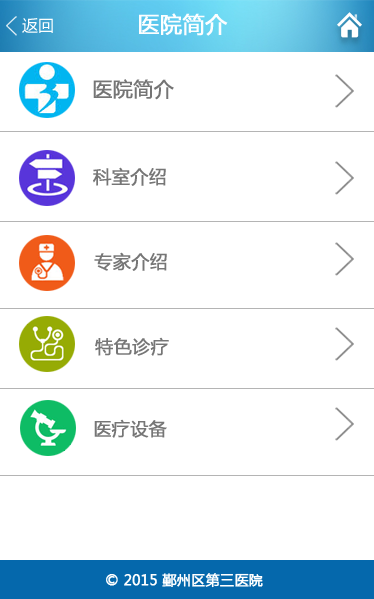
<style>
.page{position:relative;width:374px;height:599px;background:#ffffff}
.page>*{position:absolute;margin:0}
.t1{font:22px "MicrosoftYaHei";color:#fdfeff;font-weight:bold}
.t2{font:16px "MicrosoftYaHei";color:#fdffff}
.t3{font:20px "MicrosoftYaHei";color:#757575;font-weight:bold}
.t4{font:18px "MicrosoftYaHei";color:#767676;font-weight:bold}
.t5{font:14px "MicrosoftYaHei";color:#ffffff;font-weight:bold}
</style>
<div class="page">
<p class="t1" style="left:139px;top:13px;width:89px;height:23px">医院简介</p>
<p class="t2" style="left:22px;top:18px;width:31px;height:15px">返回</p>
<p class="t3" style="left:93px;top:79px;width:81px;height:21px">医院简介</p>
<p class="t4" style="left:93px;top:167px;width:73px;height:19px">科室介绍</p>
<p class="t4" style="left:94px;top:252px;width:73px;height:19px">专家介绍</p>
<p class="t4" style="left:95px;top:337px;width:74px;height:19px">特色诊疗</p>
<p class="t4" style="left:94px;top:419px;width:73px;height:19px">医疗设备</p>
<p class="t5" style="left:106px;top:573px;width:157px;height:15px">© 2015 鄞州区第三医院</p>
</div>
